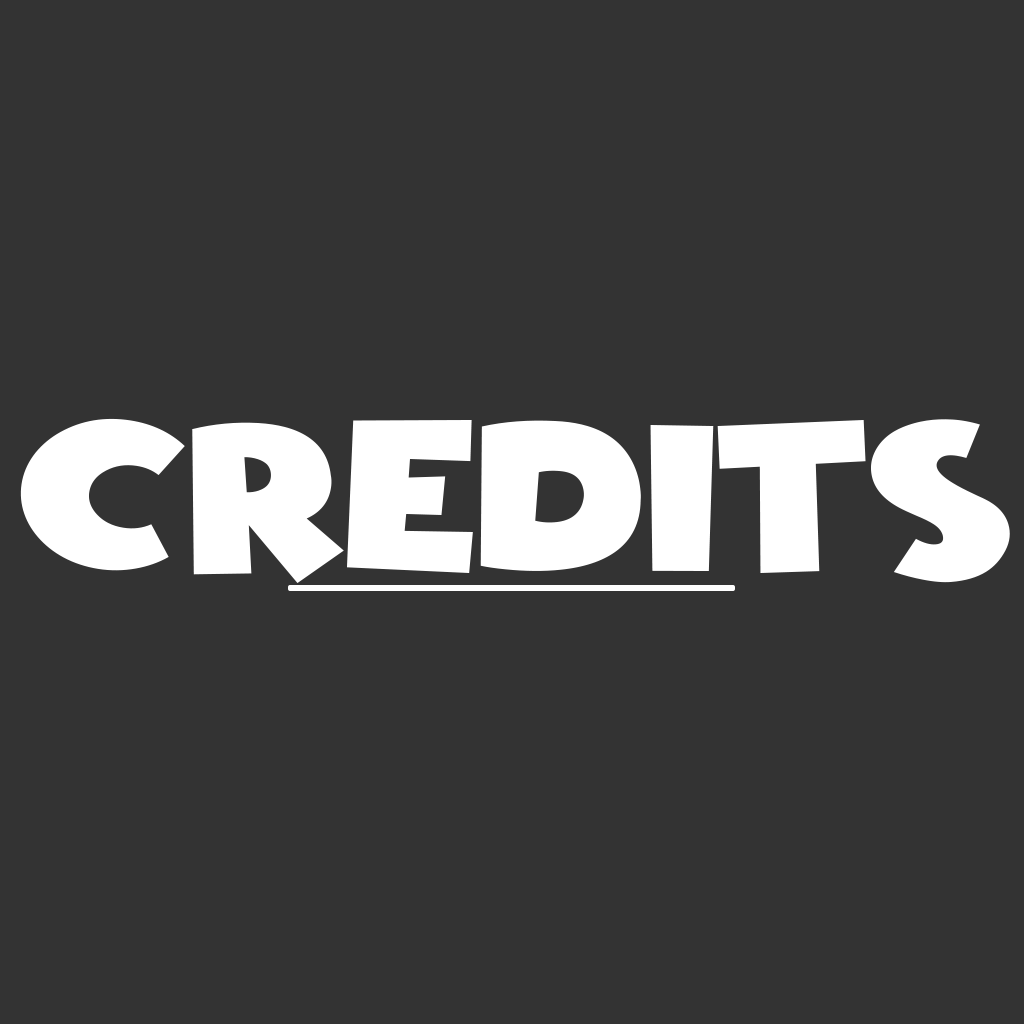
<style>
.page{position:relative;width:1024px;height:1024px;background:#333333}
.page>*{position:absolute;margin:0}
.t1{font:178.5px "WickedMouse";color:#ffffff;scale:1.18 1}
</style>
<div class="page">
<p class="t1" style="left:20px;top:418px;width:990px;height:165px">CrEdits</p>
</div>
